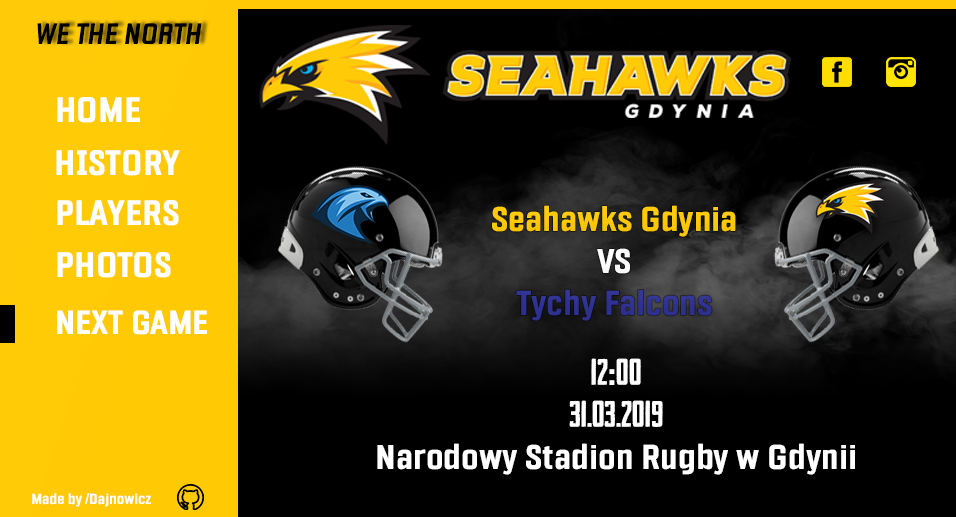
<style>
.page{position:relative;width:956px;height:517px;background:#000000}
.page>*{position:absolute;margin:0}
.t1{font:30px "Fragua-BoldItalic";color:#000000}
.t2{font:36px "Fragua-Bold";color:#ffffff}
.t3{font:35px "Fragua-Bold";color:#ffca04}
.t4{font:35px "Fragua-Bold";color:#ffffff}
.t5{font:35px "Fragua-Bold";color:#2e3192}
.t6{font:34px "Fragua-Bold";color:#ffffff}
.t7{font:35px "HeadlinerNo.45";color:#ffffff}
.t8{font:15px "Fragua-Bold";color:#ffffff}
</style>
<div class="page">
<p class="t1" style="left:37px;top:23px;width:165px;height:21px">WE THE NORTH</p>
<p class="t2" style="left:57px;top:97px;width:83px;height:26px">HOME</p>
<p class="t2" style="left:56px;top:150px;width:124px;height:26px">HISTORY</p>
<p class="t2" style="left:57px;top:200px;width:122px;height:26px">PLAYERS</p>
<p class="t3" style="left:492px;top:205px;width:244px;height:116px;text-align:center">Seahawks Gdynia<br><span class="t4">VS<br></span><span class="t5">Tychy Falcons</span></p>
<p class="t2" style="left:57px;top:252px;width:114px;height:26px">PHOTOS</p>
<p class="t6" style="left:57px;top:310px;width:150px;height:25px">NEXT GAME</p>
<p class="t4" style="left:377px;top:358px;width:478px;height:117px;text-align:center"><span class="t7">12</span>:<span class="t7">00 <br>31.03.2019<br></span>Narodowy Stadion Rugby w Gdynii</p>
<p class="t8" style="left:32px;top:493px;width:119px;height:14px">Made by /Dajnowicz</p>
</div>
